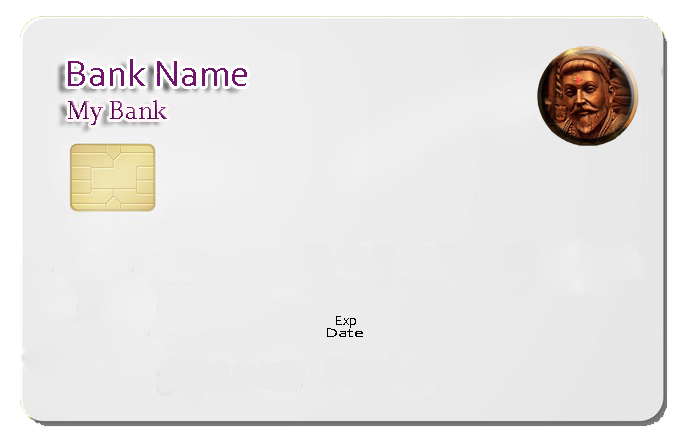
<style>
.page{position:relative;width:684px;height:439px}
.page>*{position:absolute;margin:0}
.t1{font:37.5px "Corbel";color:#6f156c}
.t2{font:14.3px "Corbel";color:#010000}
</style>
<div class="page">
<p class="t1" style="left:68px;top:59px;width:179px;height:27px">Bank Name</p>
<p class="t2" style="left:336px;top:316px;width:20px;height:12px">Exp</p>
</div>
